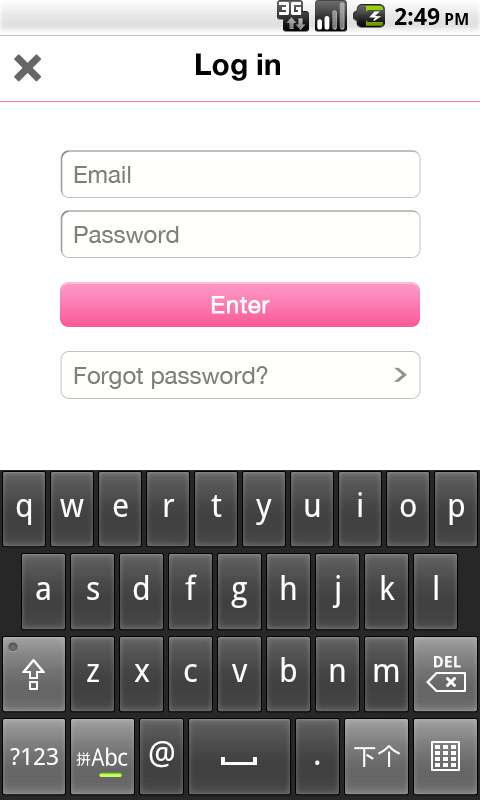
<style>
.page{position:relative;width:480px;height:800px;background:#ffffff}
.page>*{position:absolute;margin:0}
.t1{font:30px "HelveticaNeue-Bold";color:#000000}
.t2{font:24px "HelveticaNeue";color:#7f7f7e}
.t3{font:24px "HelveticaNeue";color:#ffffff;font-weight:bold}
</style>
<div class="page">
<p class="t1" style="left:196px;top:53px;width:84px;height:28px">Log in</p>
<p class="t2" style="left:74px;top:166px;width:57px;height:17px">Email</p>
<p class="t2" style="left:74px;top:226px;width:105px;height:17px">Password</p>
<p class="t3" style="left:211px;top:296px;width:59px;height:18px">Enter</p>
<p class="t2" style="left:74px;top:366px;width:194px;height:23px">Forgot password?</p>
</div>
